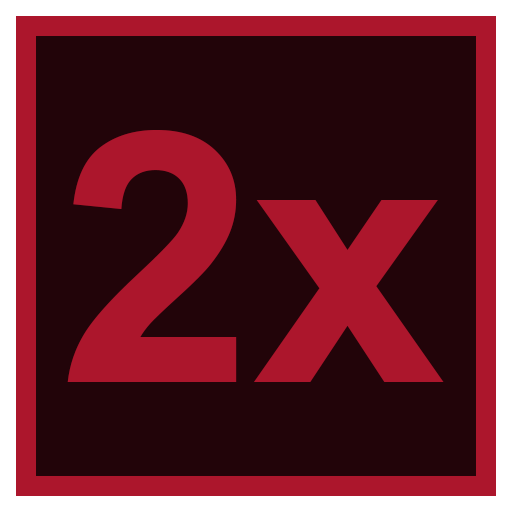
<style>
.page{position:relative;width:512px;height:512px;background:#220409}
.page>*{position:absolute;margin:0}
.t1{font:350px "Arial-BoldMT";color:#ac162c}
</style>
<div class="page">
<p class="t1" style="left:67px;top:130px;width:377px;height:252px">2x</p>
</div>
